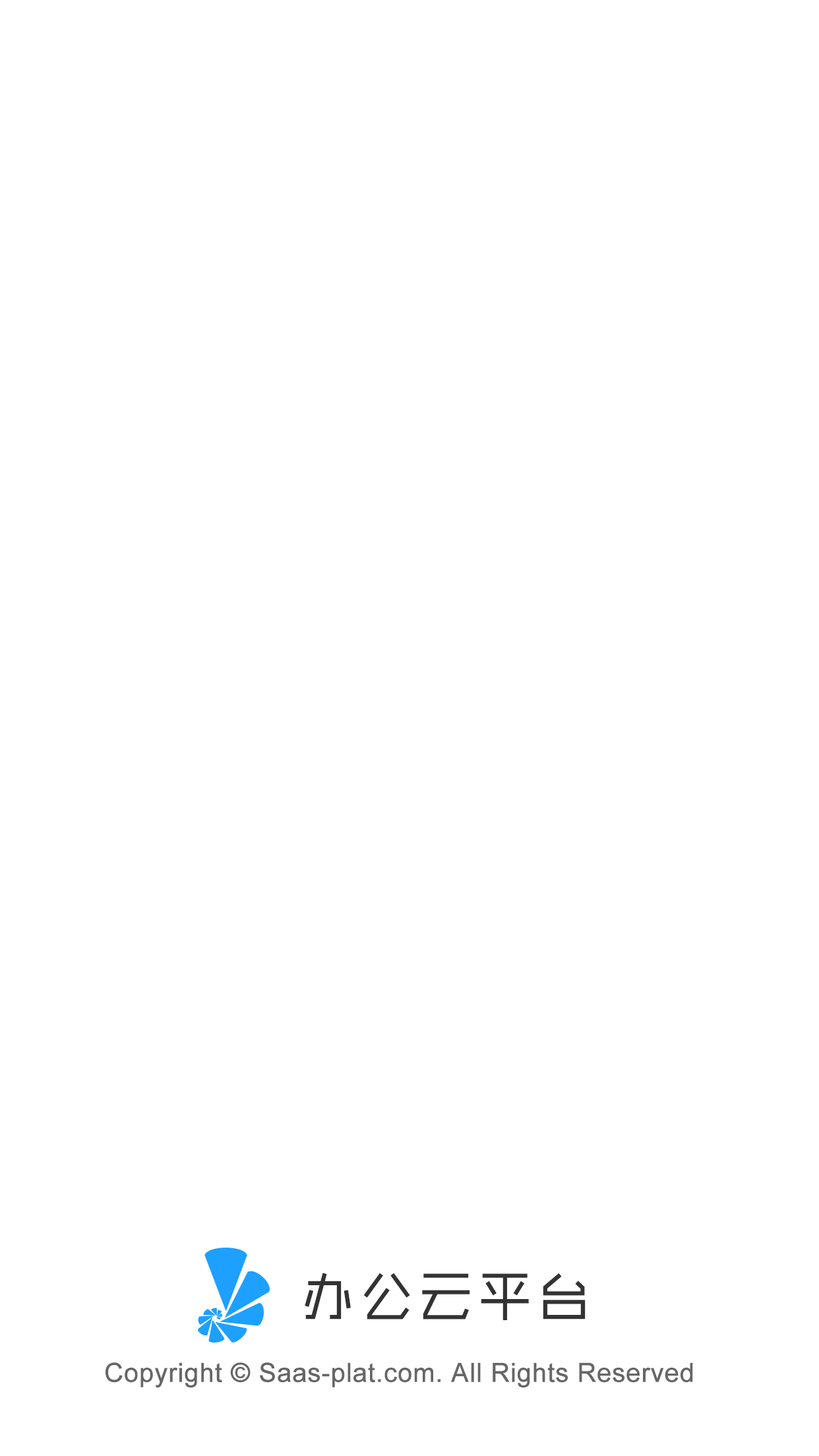
<style>
.page{position:relative;width:819px;height:1456px;background:#ffffff}
.page>*{position:absolute;margin:0}
.t1{font:52.4px "RTWSShangGoG0v1-Regular";letter-spacing:0.1em;color:#333333;font-weight:bold}
.t2{font:26.2px "ArialMT";color:#666666;font-weight:bold}
</style>
<div class="page">
<p class="t1" style="left:305px;top:1273px;width:281px;height:47px">办公云平台</p>
<p class="t2" style="left:106px;top:1362px;width:587px;height:26px">Copyright © Saas-plat.com. All Rights Reserved</p>
</div>
